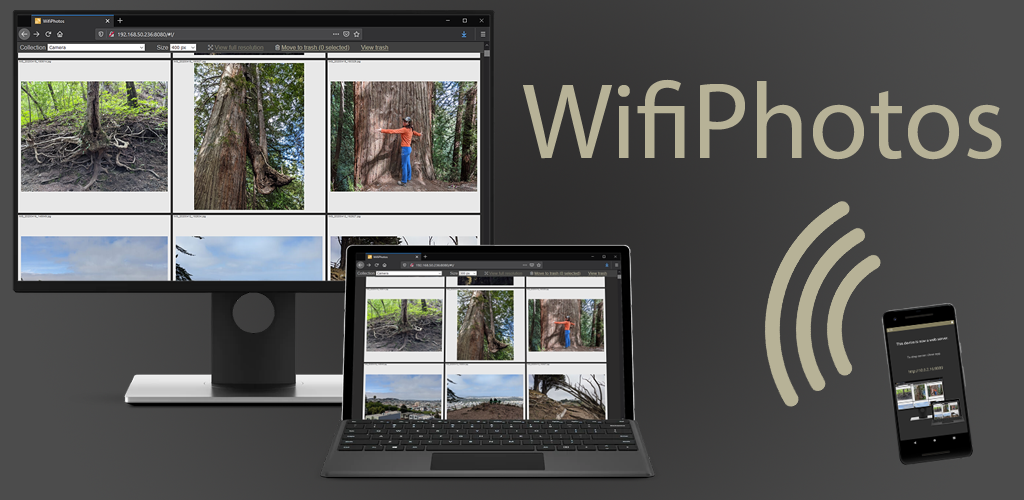
<style>
.page{position:relative;width:1024px;height:500px}
.page>*{position:absolute;margin:0}
.t1{font:108px "MyriadPro-Regular";color:#b7b297}
</style>
<div class="page">
<p class="t1" style="left:523px;top:79px;width:479px;height:81px">WifiPhotos</p>
</div>
